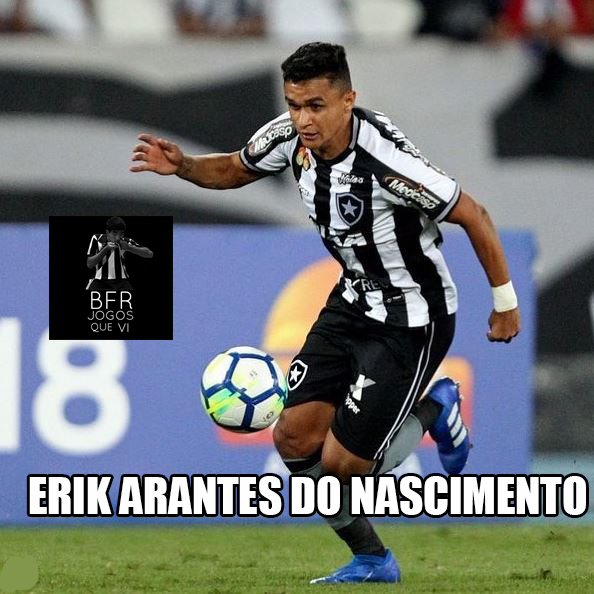
<style>
.page{position:relative;width:594px;height:594px}
.page>*{position:absolute;margin:0}
.t1{font:46.5px "Impact";color:#fefefe}
</style>
<div class="page">
<p class="t1" style="left:29px;top:476px;width:557px;height:39px">ERIK ARANTES DO NASCIMENTO</p>
</div>
